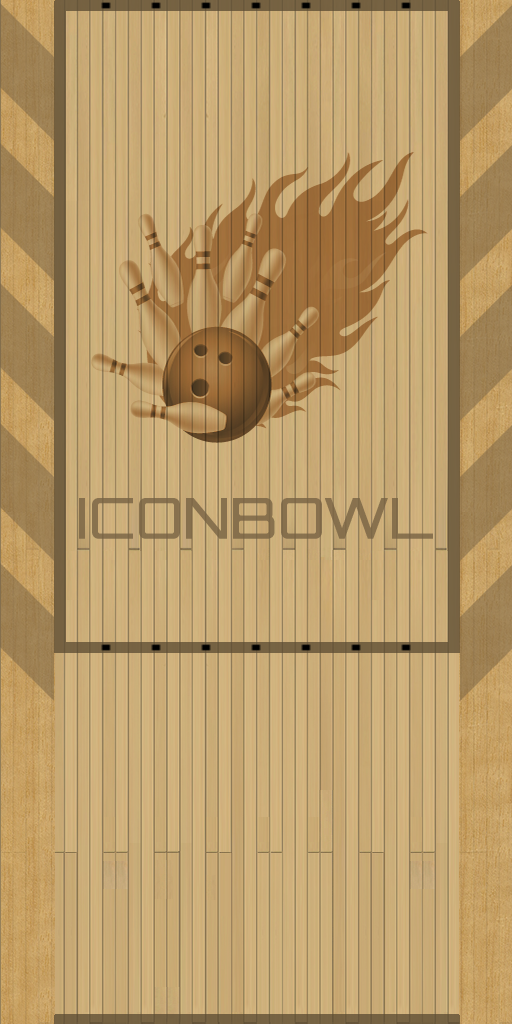
<style>
.page{position:relative;width:512px;height:1024px}
.page>*{position:absolute;margin:0}
.t1{font:55px "Orbitron-Light";color:#776243;font-weight:bold}
</style>
<div class="page">
<p class="t1" style="left:79px;top:498px;width:354px;height:41px;opacity:0.8">ICONBOWL</p>
</div>
